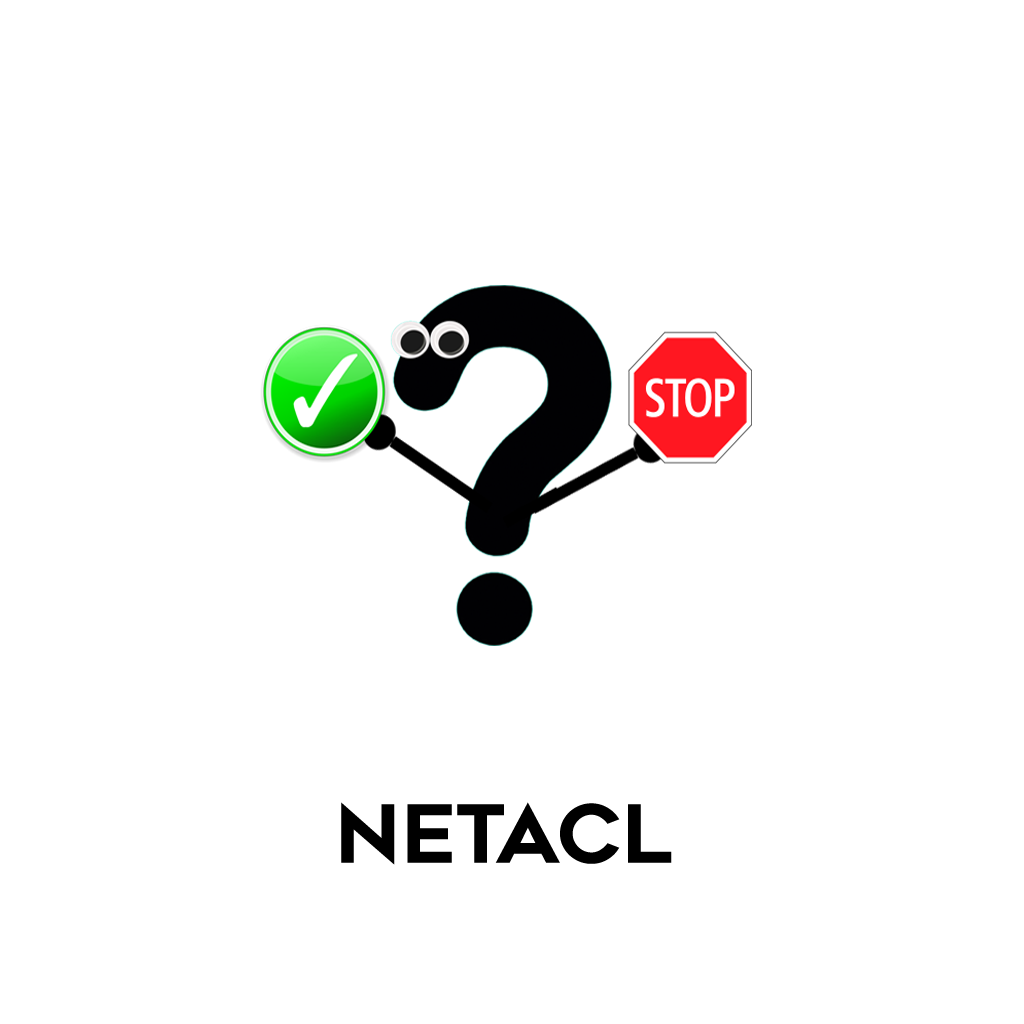
<style>
.page{position:relative;width:1024px;height:1024px;background:#ffffff}
.page>*{position:absolute;margin:0}
.t1{font:80px "Renogare-Regular";color:#000000}
</style>
<div class="page">
<p class="t1" style="left:341px;top:802px;width:331px;height:63px">NETACL</p>
</div>
